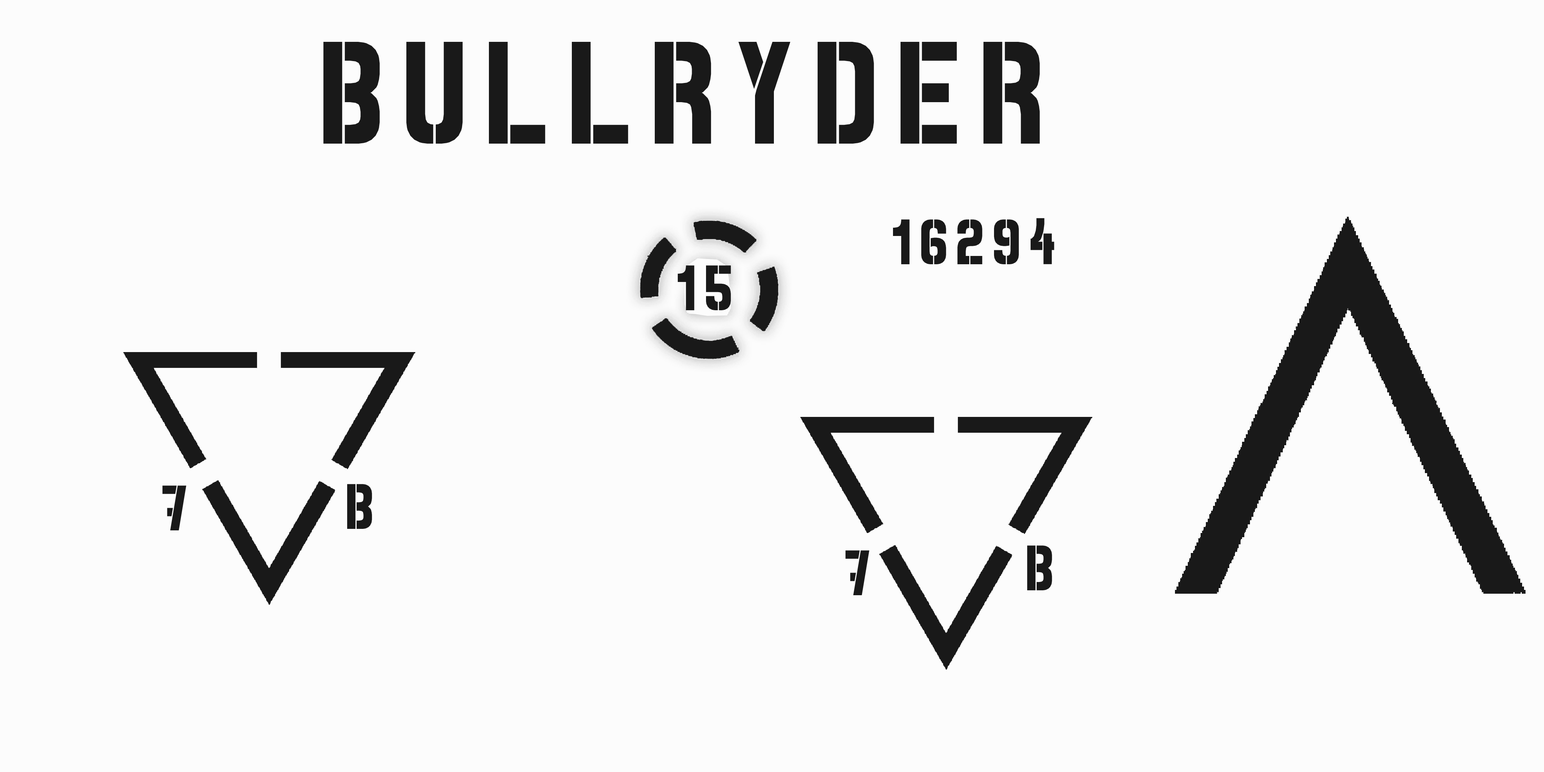
<style>
.page{position:relative;width:1544px;height:772px;background:#fcfcfc}
.page>*{position:absolute;margin:0}
.t1{font:171.3px "Spray.ME";letter-spacing:0.14em;color:#191919}
.t2{font:75.4px "Spray.ME";letter-spacing:0.14em;color:#191919}
</style>
<div class="page">
<p class="t1" style="left:323px;top:42px;width:717px;height:102px">bullryder</p>
<p class="t2" style="left:893px;top:218px;width:162px;height:46px">16294</p>
<p class="t2" style="left:162px;top:486px;width:24px;height:44px">7</p>
<p class="t2" style="left:347px;top:484px;width:25px;height:45px">b</p>
<p class="t2" style="left:1027px;top:546px;width:25px;height:44px">b</p>
<p class="t2" style="left:846px;top:550px;width:23px;height:45px">7</p>
</div>
